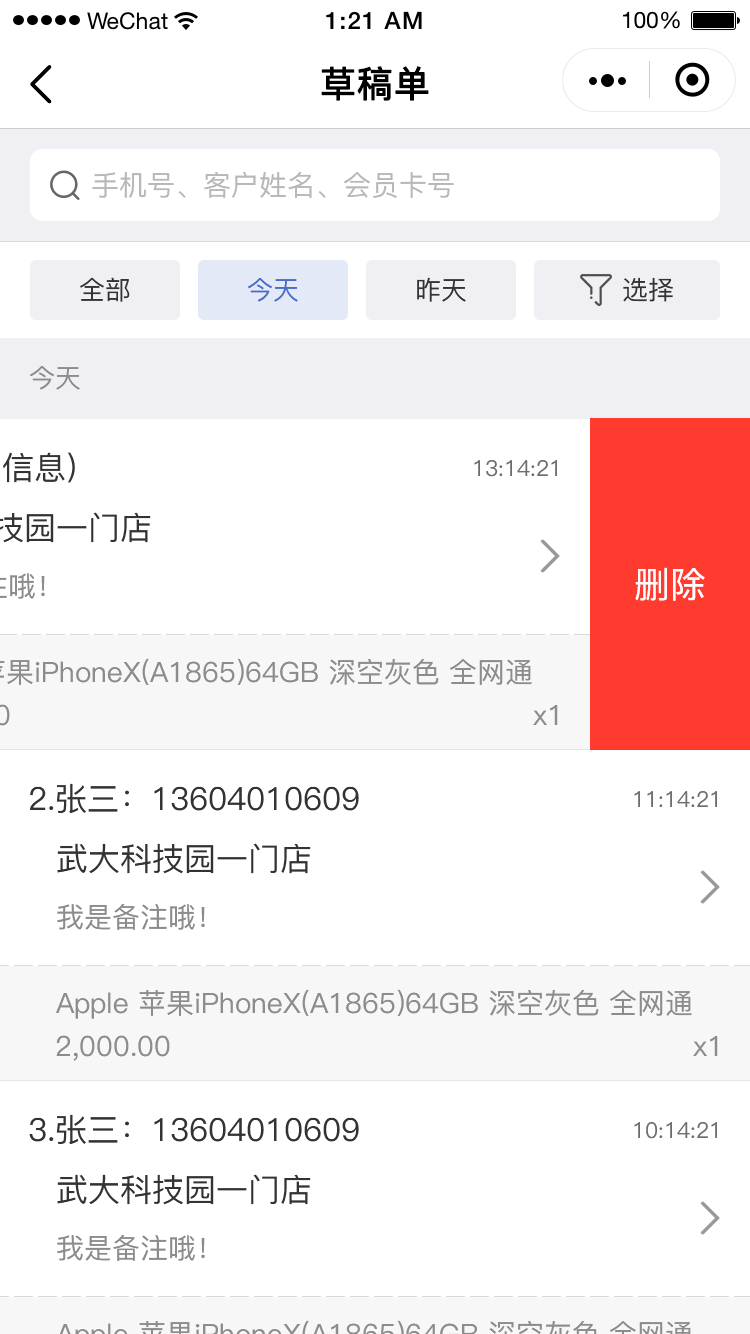
<style>
.page{position:relative;width:750px;height:1334px;background:#ffffff}
.page>*{position:absolute;margin:0}
.t1{font:36px "PingFang-SC-Medium";color:#000000;font-weight:bold}
.t2{font:28px "PingFang-SC-Medium";color:#b8b8b8}
.t3{font:26px "PingFang-SC-Medium";color:#333333}
.t4{font:26px "PingFang-SC-Medium";color:#476ec9}
.t5{font:26px "PingFang-SC-Medium";color:#8c8c8c}
.t6{font:22px "PingFang-SC-Medium";color:#6e6e6e}
.t7{font:36px "PingFang-SC-Medium";color:#ffffff}
.t8{font:28px "PingFang-SC-Medium";color:#8c8c8c}
.t9{font:32px "PingFang-SC-Medium";color:#333333}
</style>
<div class="page">
<p class="t1" style="left:321px;top:66px;width:108px;height:35px">草稿单</p>
<p class="t2" style="left:92px;top:172px;width:362px;height:26px">手机号、客户姓名、会员卡号</p>
<p class="t3" style="left:80px;top:277px;width:50px;height:25px">全部</p>
<p class="t4" style="left:248px;top:278px;width:50px;height:24px">今天</p>
<p class="t3" style="left:417px;top:277px;width:49px;height:25px">昨天</p>
<p class="t3" style="left:623px;top:277px;width:50px;height:25px">选择</p>
<p class="t5" style="left:30px;top:366px;width:50px;height:24px">今天</p>
<p class="t6" style="left:474px;top:460px;width:83px;height:17px">13:14:21</p>
<p class="t7" style="left:635px;top:567px;width:70px;height:34px">删除</p>
<p class="t8" style="left:533px;top:705px;width:25px;height:20px">x1</p>
<p class="t9" style="left:30px;top:783px;width:329px;height:31px">2.张三：13604010609</p>
<p class="t6" style="left:634px;top:791px;width:83px;height:16px">11:14:21</p>
<p class="t9" style="left:57px;top:843px;width:254px;height:31px">武大科技园一门店</p>
<p class="t8" style="left:57px;top:903px;width:148px;height:27px">我是备注哦！</p>
<p class="t8" style="left:56px;top:989px;width:636px;height:30px">Apple 苹果iPhoneX(A1865)64GB 深空灰色 全网通</p>
<p class="t8" style="left:56px;top:1035px;width:114px;height:26px">2,000.00</p>
<p class="t8" style="left:693px;top:1036px;width:25px;height:20px">x1</p>
<p class="t9" style="left:29px;top:1114px;width:330px;height:31px">3.张三：13604010609</p>
<p class="t6" style="left:634px;top:1122px;width:83px;height:17px">10:14:21</p>
<p class="t9" style="left:57px;top:1174px;width:254px;height:31px">武大科技园一门店</p>
<p class="t8" style="left:57px;top:1234px;width:148px;height:27px">我是备注哦！</p>
</div>
